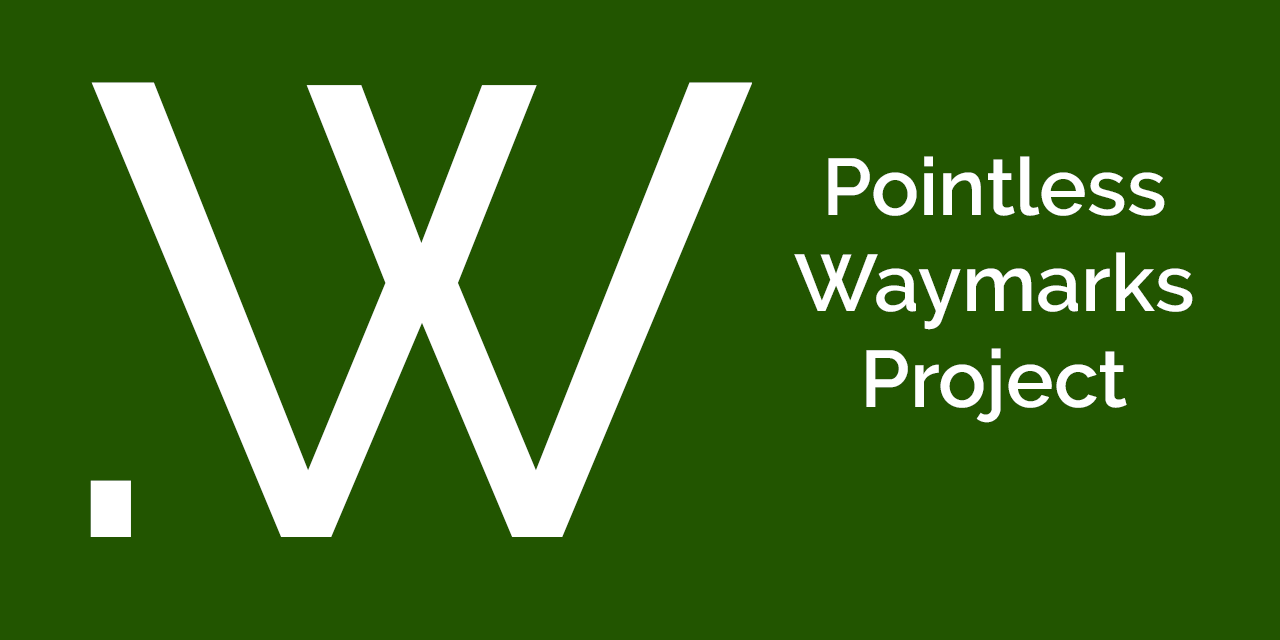
<style>
.page{position:relative;width:1280px;height:640px;background:#225500}
.page>*{position:absolute;margin:0}
.t1{font:640px "Raleway-Medium";color:#ffffff}
.t2{font:80px "Raleway-SemiBold";color:#ffffff}
.t3{font:440px "Raleway-SemiBold";color:#ffffff}
</style>
<div class="page">
<p class="t1" style="left:91px;top:82px;width:661px;height:455px">W</p>
<p class="t2" style="left:794px;top:156px;width:399px;height:267px;text-align:center">Pointless<br>Waymarks<br>Project</p>
<p class="t3" style="left:90px;top:480px;width:41px;height:57px">.</p>
</div>
